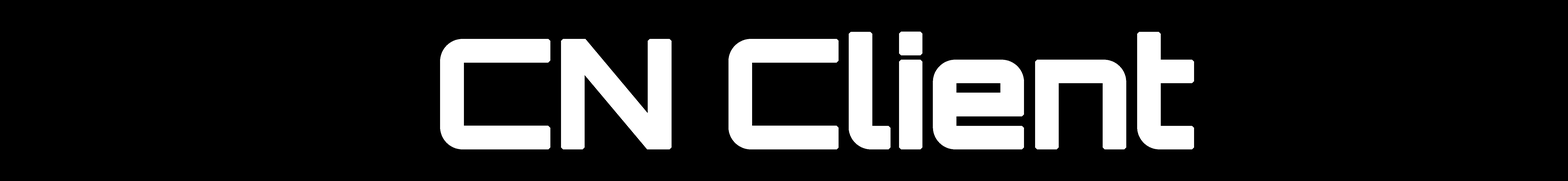
<style>
.page{position:relative;width:1568px;height:181px;background:#000000}
.page>*{position:absolute;margin:0}
.t1{font:147.6px "Orbitron-Bold";letter-spacing:-0.03em;color:#ffffff;font-weight:bold}
</style>
<div class="page">
<p class="t1" style="left:440px;top:32px;width:754px;height:118px">CN Client</p>
</div>
